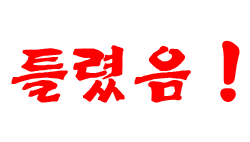
<style>
.page{position:relative;width:250px;height:142px;background:#ffffff}
.page>*{position:absolute;margin:0}
.t1{font:60px "Yj-BACDOO-Bold";color:#fe0000}
.t2{font:72px "Yj-BACDOO-Bold";color:#fe0000}
</style>
<div class="page">
<p class="t1" style="left:11px;top:40px;width:229px;height:63px">틀렸음 <span class="t2">!</span></p>
</div>
